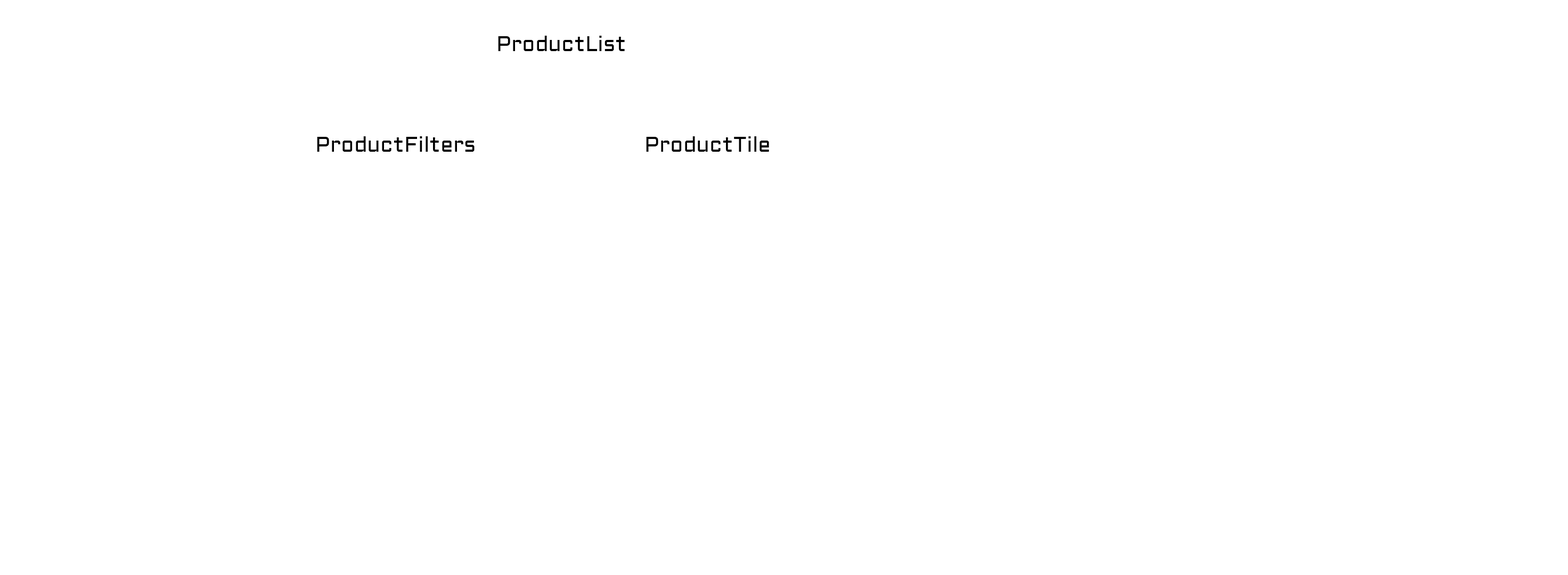
<style>
.page{position:relative;width:1568px;height:575px;background:#ffffff}
.page>*{position:absolute;margin:0}
.t1{font:21.3px "Aldrich-Regular";color:#000000}
</style>
<div class="page">
<p class="t1" style="left:498px;top:36px;width:127px;height:15px">ProductList</p>
<p class="t1" style="left:317px;top:136px;width:158px;height:16px">ProductFilters</p>
<p class="t1" style="left:646px;top:136px;width:123px;height:16px">ProductTile</p>
</div>
